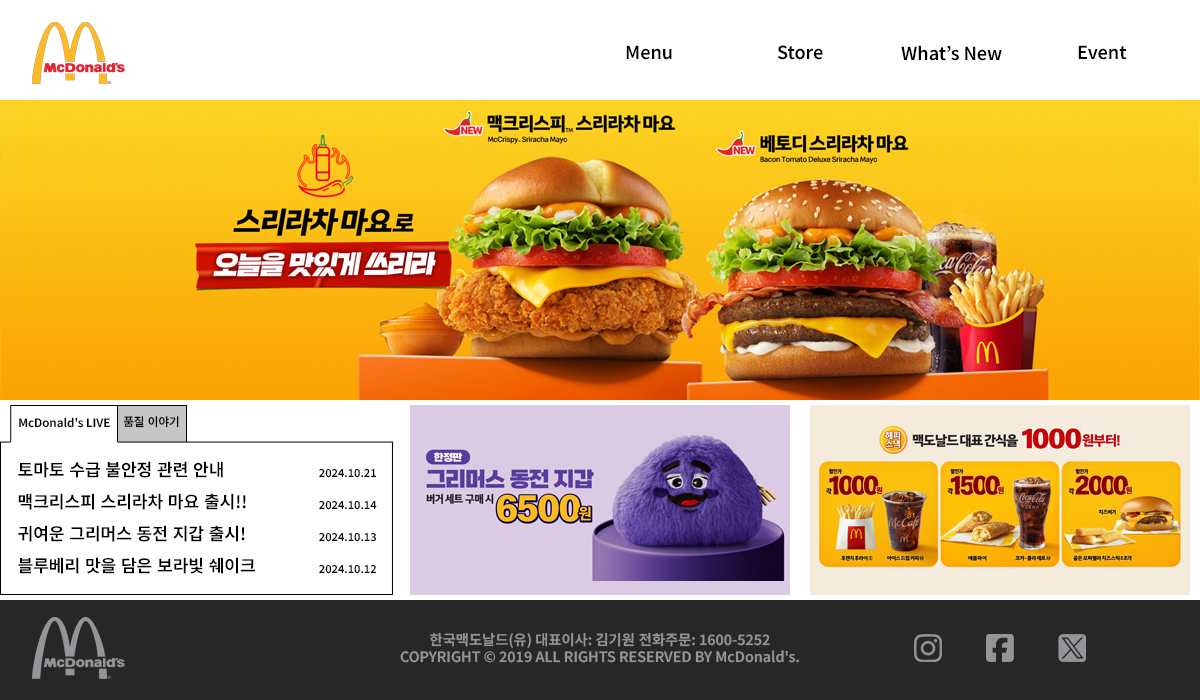
<style>
.page{position:relative;width:1200px;height:700px;background:#ffffff}
.page>*{position:absolute;margin:0}
.t1{font:18px "NotoSansKR-SemiBold";color:#000000}
.t2{font:11.6px "NotoSansKR-SemiBold";color:#000000}
.t3{font:17px "NotoSansKR-SemiBold";color:#000000}
.t4{font:11px "NotoSansKR-SemiBold";color:#000000}
.t5{font:14.3px "NotoSansKR-SemiBold";color:#939598}
</style>
<div class="page">
<p class="t1" style="left:626px;top:45px;width:46px;height:15px">Menu</p>
<p class="t1" style="left:777px;top:45px;width:46px;height:15px">Store</p>
<p class="t1" style="left:901px;top:45px;width:101px;height:16px">What’s New</p>
<p class="t1" style="left:1078px;top:45px;width:49px;height:15px">Event</p>
<p class="t2" style="left:19px;top:417px;width:91px;height:11px">McDonald's LIVE</p>
<p class="t2" style="left:123px;top:416px;width:56px;height:12px">품질 이야기</p>
<p class="t3" style="left:18px;top:461px;width:205px;height:17px">토마토 수급 불안정 관련 안내</p>
<p class="t4" style="left:319px;top:468px;width:58px;height:10px">2024.10.21</p>
<p class="t3" style="left:18px;top:493px;width:228px;height:17px">맥크리스피 스리라차 마요 출시!!</p>
<p class="t4" style="left:319px;top:500px;width:58px;height:10px">2024.10.14</p>
<p class="t3" style="left:18px;top:525px;width:227px;height:17px">귀여운 그리머스 동전 지갑 출시!</p>
<p class="t4" style="left:319px;top:532px;width:57px;height:10px">2024.10.13</p>
<p class="t3" style="left:18px;top:557px;width:237px;height:17px">블루베리 맛을 담은 보라빛 쉐이크</p>
<p class="t4" style="left:319px;top:564px;width:58px;height:10px">2024.10.12</p>
<p class="t5" style="left:400px;top:632px;width:399px;height:31px;text-align:center">한국맥도날드(유) 대표이사: 김기원 전화주문: 1600-5252<br>COPYRIGHT © 2019 ALL RIGHTS RESERVED BY McDonald's.</p>
</div>
